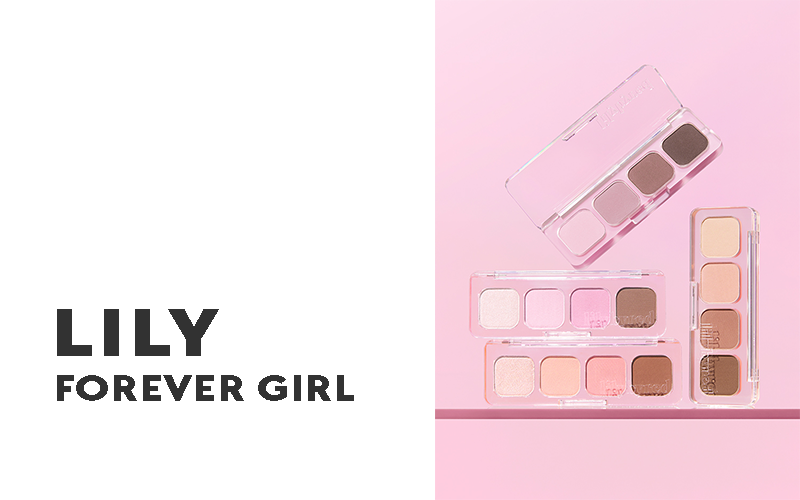
<style>
.page{position:relative;width:800px;height:500px;background:#ffffff}
.page>*{position:absolute;margin:0}
.t1{font:70.8px "TTChocolates-ExtraBold";letter-spacing:0.04em;color:#323232;scale:1.26 1}
.t2{font:37.5px "TTChocolates-ExtraBold";color:#323232;scale:1.26 1}
</style>
<div class="page">
<p class="t1" style="left:57px;top:309px;width:162px;height:47px">LILY</p>
<p class="t2" style="left:57px;top:375px;width:297px;height:26px">FOREVER GIRL</p>
</div>
